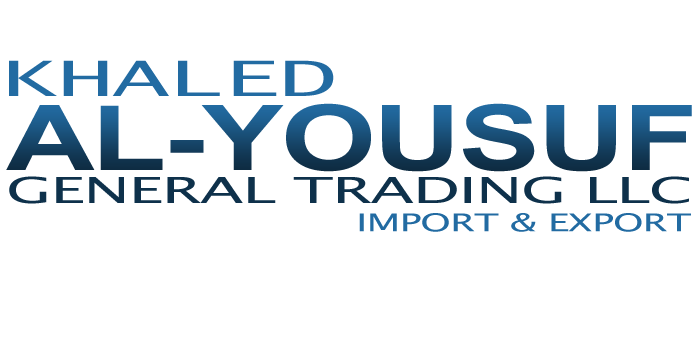
<style>
.page{position:relative;width:700px;height:350px;background:#ffffff}
.page>*{position:absolute;margin:0}
.t1{font:48.8px "LucidaSans-Typewriter";letter-spacing:-0.02em;color:#226ba2;scale:1.96 1}
.t2{font:90.2px "Arial-BoldMT";letter-spacing:-0.02em;scale:1.35 1}
.t3{font:36.1px "LucidaSansUnicode";letter-spacing:-0.02em;color:#0e314b;scale:1.75 1}
.t4{font:24.6px "LucidaSansUnicode";letter-spacing:-0.02em;color:#226ba2;scale:1.59 1}
</style>
<div class="page">
<p class="t1" style="left:9px;top:60px;width:325px;height:36px">KHALED</p>
<p class="t2" style="left:6px;top:103px;width:686px;height:69px">AL-YOUSUF</p>
<p class="t3" style="left:9px;top:176px;width:680px;height:28px">GENERAL TRADING LLC</p>
<p class="t4" style="left:359px;top:213px;width:332px;height:19px">IMPORT &amp; EXPORT</p>
</div>
